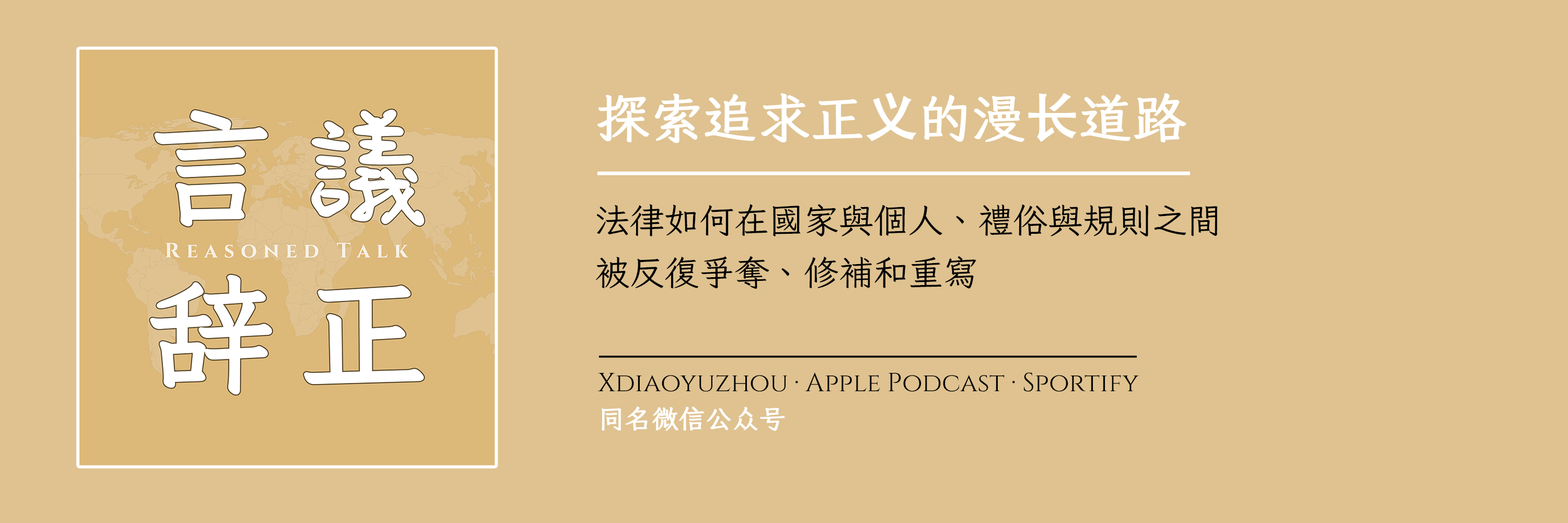
<style>
.page{position:relative;width:1568px;height:523px;background:#dfc290}
.page>*{position:absolute;margin:0}
.t1{font:52.3px "Iansui-Regular";color:#ffffff;font-weight:bold}
.t2{font:52.3px "AdobeHeitiStd-Regular";color:#ffffff;font-weight:bold}
.t3{font:34.8px/52.3px "Iansui-Regular";color:#010101}
.t4{font:26.1px "Cinzel-Regular";color:#000000;font-weight:bold}
.t5{font:26.1px "Iansui-Regular";color:#ffffff;font-weight:bold}
</style>
<div class="page">
<p class="t1" style="left:597px;top:93px;width:589px;height:50px">探索追求正<span class="t2">义</span>的漫<span class="t2">长</span>道路</p>
<p class="t3" style="left:596px;top:204px;width:622px;height:85px">法律如何在國家與個人、禮俗與規則之間<br>被反復爭奪、修補和重寫</p>
<p class="t4" style="left:597px;top:372px;width:542px;height:19px">Xdiaoyuzhou · Apple Podcast · Sportify</p>
<p class="t5" style="left:602px;top:406px;width:183px;height:25px">同名微信公众号</p>
</div>
